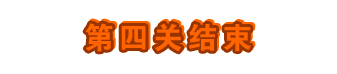
<style>
.page{position:relative;width:337px;height:74px;background:#ffffff}
.page>*{position:absolute;margin:0}
.t1{font:30px "Jdahei";letter-spacing:0.15em;color:#ff6400}
</style>
<div class="page">
<p class="t1" style="left:85px;top:23px;width:166px;height:29px">第四关结束</p>
</div>
